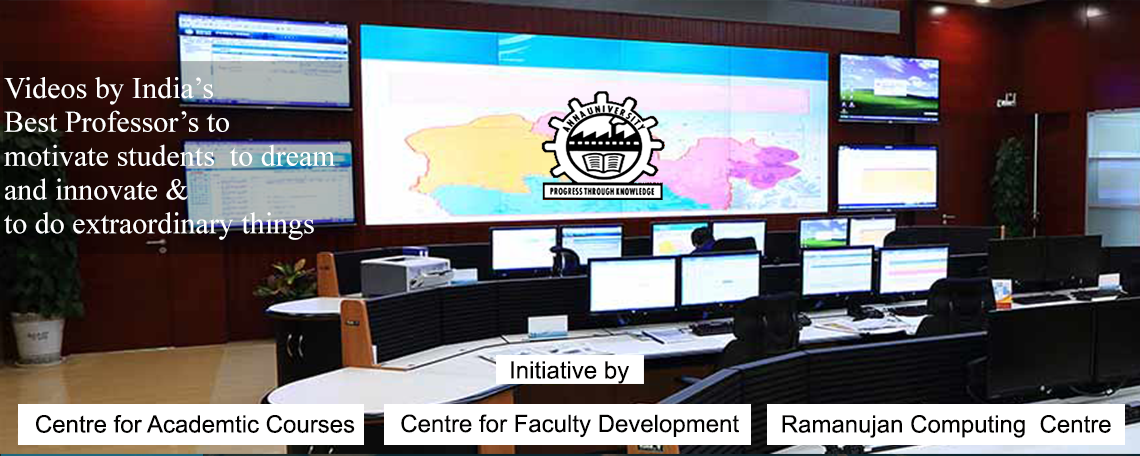
<style>
.page{position:relative;width:1140px;height:456px}
.page>*{position:absolute;margin:0}
.t1{font:30px/33.8px "TimesNewRomanPSMT";color:#ffffff}
.t2{font:24px "ArialMT";color:#020100}
</style>
<div class="page">
<p class="t1" style="left:4px;top:77px;width:331px;height:163px">Videos by India’s <br>Best Professor’s to <br>motivate students  to dream<br>and innovate &amp; <br>to do extraordinary things</p>
<p class="t2" style="left:511px;top:361px;width:118px;height:23px">Initiative by</p>
<p class="t2" style="left:401px;top:414px;width:338px;height:24px">Centre for Faculty Development</p>
<p class="t2" style="left:36px;top:415px;width:319px;height:18px">Centre for Academtic Courses</p>
<p class="t2" style="left:782px;top:415px;width:329px;height:23px">Ramanujan Computing  Centre</p>
</div>
